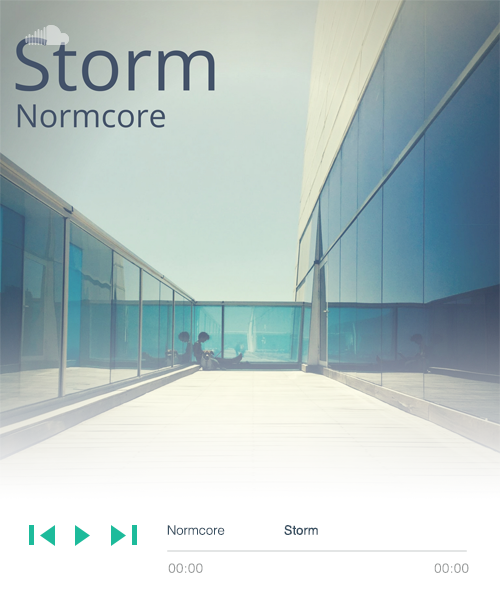
<style>
.page{position:relative;width:500px;height:600px}
.page>*{position:absolute;margin:0}
.t1{font:13px "Helvetica-Light";color:#395062}
.t2{font:13px "Helvetica";color:#395062}
.t3{font:13px "Helvetica-Light";letter-spacing:0.04em;color:#999b9b}
</style>
<div class="page">
<p class="t1" style="left:167px;top:525px;width:58px;height:10px">Normcore</p>
<p class="t2" style="left:284px;top:525px;width:34px;height:10px">Storm</p>
<p class="t3" style="left:168px;top:563px;width:35px;height:10px">00:00</p>
<p class="t3" style="left:434px;top:563px;width:35px;height:10px">00:00</p>
</div>
